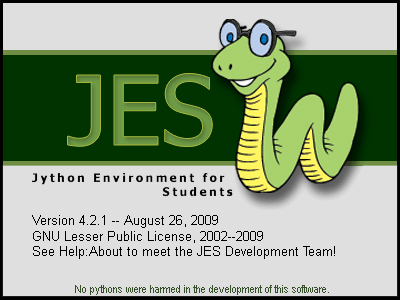
<style>
.page{position:relative;width:400px;height:300px;background:#e0dfdf}
.page>*{position:absolute;margin:0}
.t1{font:13px "ArialMT";color:#000000}
.t2{font:11px "ArialNarrow";color:#344f2a}
</style>
<div class="page">
<p class="t1" style="left:32px;top:215px;width:303px;height:44px">Version 4.2.1 -- August 26, 2009<br>GNU Lesser Public License, 2002--2009<br>See Help:About to meet the JES Development Team!</p>
<p class="t2" style="left:75px;top:285px;width:254px;height:10px">No pythons were harmed in the development of this software.</p>
</div>
